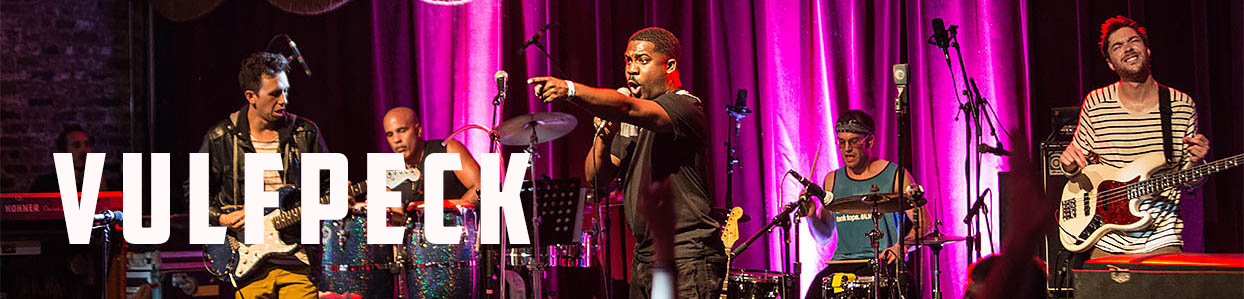
<style>
.page{position:relative;width:1244px;height:299px}
.page>*{position:absolute;margin:0}
.t1{font:125px "AmericanCaptain";letter-spacing:0.1em;color:#fff8f8}
</style>
<div class="page">
<p class="t1" style="left:53px;top:153px;width:478px;height:91px">VULFPECK</p>
</div>
